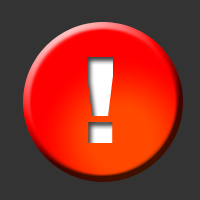
<style>
.page{position:relative;width:200px;height:200px;background:#333333}
.page>*{position:absolute;margin:0}
.t1{font:120px "Arial-Black";color:#ffffff}
</style>
<div class="page">
<p class="t1" style="left:87px;top:57px;width:26px;height:86px">!</p>
</div>
